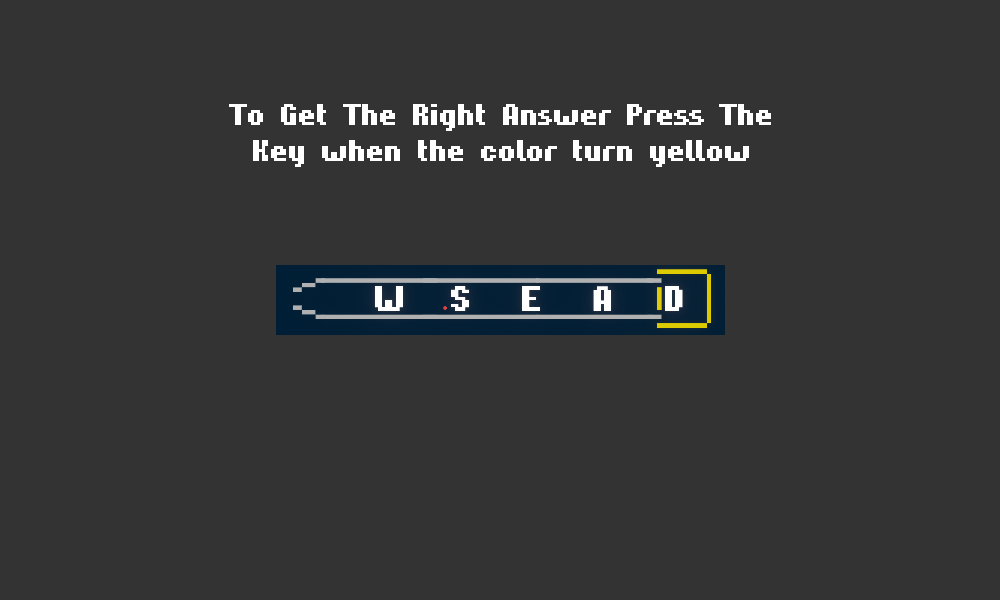
<style>
.page{position:relative;width:1000px;height:600px;background:#333333}
.page>*{position:absolute;margin:0}
.t1{font:30px "Hardpixel";color:#ffffff}
</style>
<div class="page">
<p class="t1" style="left:229px;top:104px;width:542px;height:63px;text-align:center">To Get The Right Answer Press The<br>Key when the color turn yellow</p>
</div>
